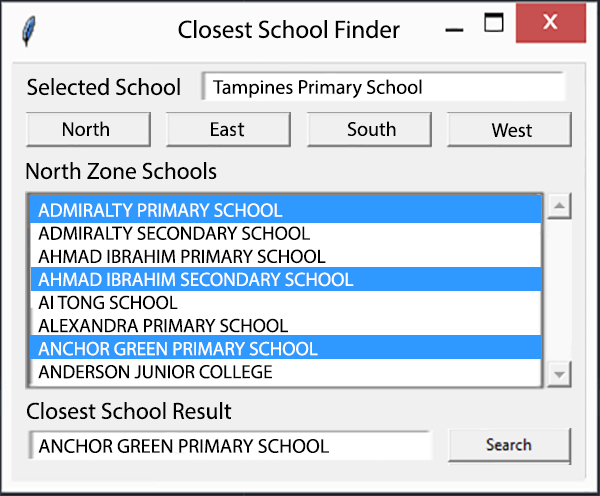
<style>
.page{position:relative;width:600px;height:496px;background:#f0f0f0}
.page>*{position:absolute;margin:0}
.t1{font:25px "MyriadPro-Regular";color:#000000}
.t2{font:23.3px "MyriadPro-Regular";color:#000000}
.t3{font:20px "MyriadPro-Regular";color:#000000}
.t4{font:21.7px "MyriadPro-Regular";color:#000000}
.t5{font:19.2px "MyriadPro-Regular";color:#000000}
.t6{font:19.2px "MyriadPro-Regular";color:#ffffff}
</style>
<div class="page">
<p class="t1" style="left:178px;top:20px;width:222px;height:19px">Closest School Finder</p>
<p class="t2" style="left:27px;top:78px;width:153px;height:18px">Selected School</p>
<p class="t3" style="left:213px;top:79px;width:209px;height:20px">Tampines Primary School</p>
<p class="t4" style="left:237px;top:122px;width:8px;height:15px">t</p>
<p class="t2" style="left:26px;top:162px;width:191px;height:18px">North Zone Schools</p>
<p class="t5" style="left:38px;top:203px;width:316px;height:176px"><span class="t6">ADMIRALTY PRIMARY SCHOOL<br></span>ADMIRALTY SECONDARY SCHOOL<br>AHMAD IBRAHIM PRIMARY SCHOOL<br><span class="t6">AHMAD IBRAHIM SECONDARY SCHOOL<br></span>AI TONG SCHOOL<br>ALEXANDRA PRIMARY SCHOOL<br><span class="t6">ANCHOR GREEN PRIMARY SCHOOL<br></span>ANDERSON JUNIOR COLLEGE</p>
<p class="t2" style="left:27px;top:402px;width:205px;height:18px">Closest School Result</p>
<p class="t3" style="left:38px;top:439px;width:291px;height:14px">ANCHOR GREEN PRIMARY SCHOOL</p>
</div>
